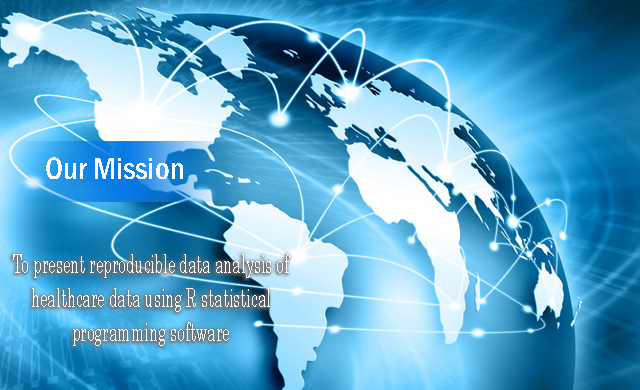
<style>
.page{position:relative;width:640px;height:390px}
.page>*{position:absolute;margin:0}
.t1{font:31.6px "FranklinGothic-MediumCond";color:#fbfcfc}
.t2{font:25.5px/34px "Century";color:#fbfcfc;scale:0.59 1}
</style>
<div class="page">
<p class="t1" style="left:46px;top:157px;width:137px;height:22px">Our Mission</p>
<p class="t2" style="left:13px;top:254px;width:277px;height:92px;text-align:center">To present reproducible data analysis of healthcare data using R statistical programming software</p>
</div>
